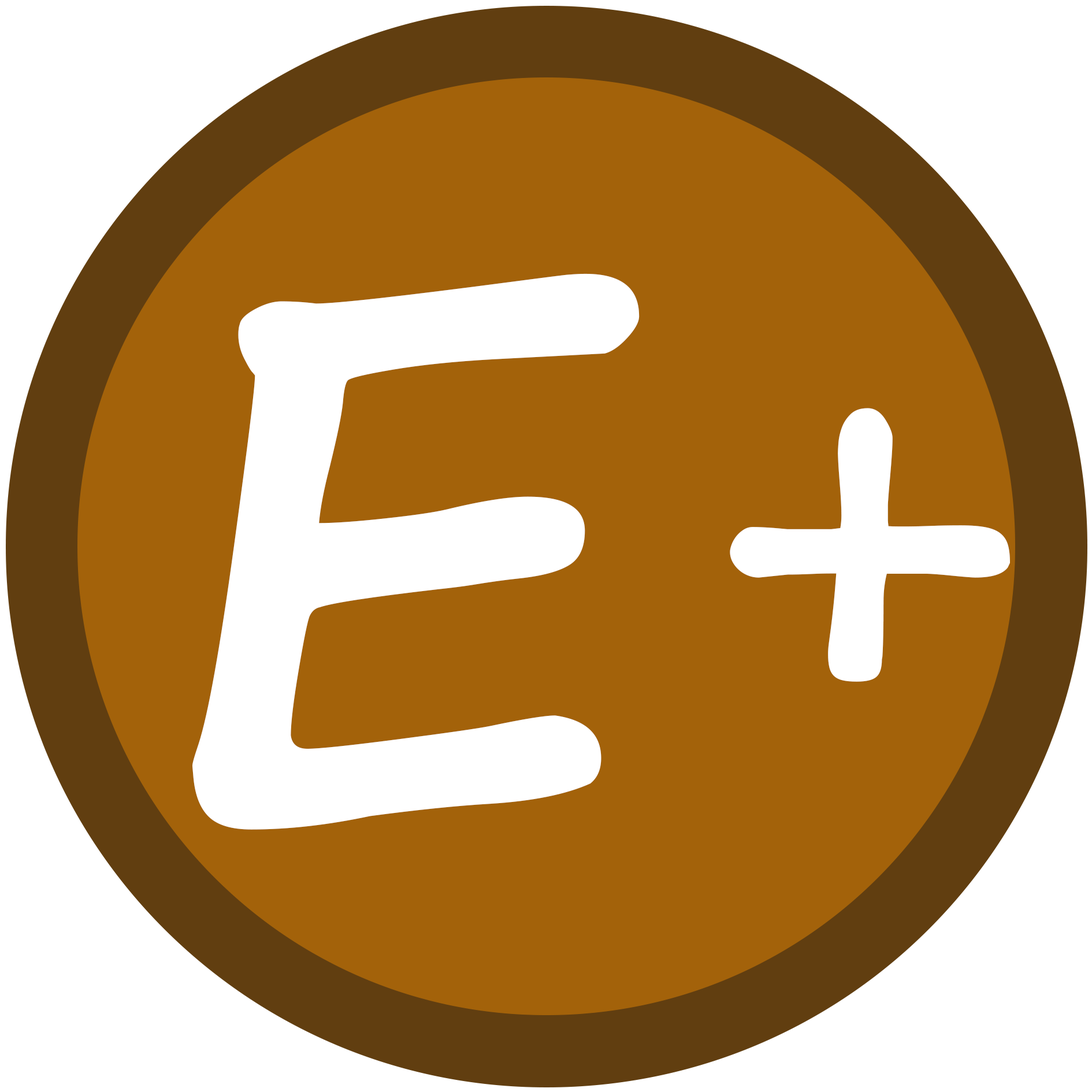
<style>
.page{position:relative;width:1092px;height:1092px;background:#a3620a}
.page>*{position:absolute;margin:0}
.t1{font:740.4px "SegoePrint-Bold";color:#ffffff}
.t2{font:559px "SegoeScript-Bold";color:#ffffff}
</style>
<div class="page">
<p class="t1" style="left:192px;top:273px;width:448px;height:557px">E</p>
<p class="t2" style="left:730px;top:408px;width:280px;height:274px">+</p>
</div>
